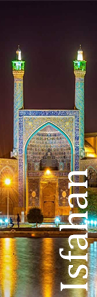
<style>
.page{position:relative;width:97px;height:297px}
.page>*{position:absolute;margin:0}
.t1{font:40px "Cambria";color:#ffffff}
</style>
<div class="page">
<p class="t1" style="left:59px;top:169px;width:29px;height:122px;rotate:-90deg">Isfahan</p>
</div>
